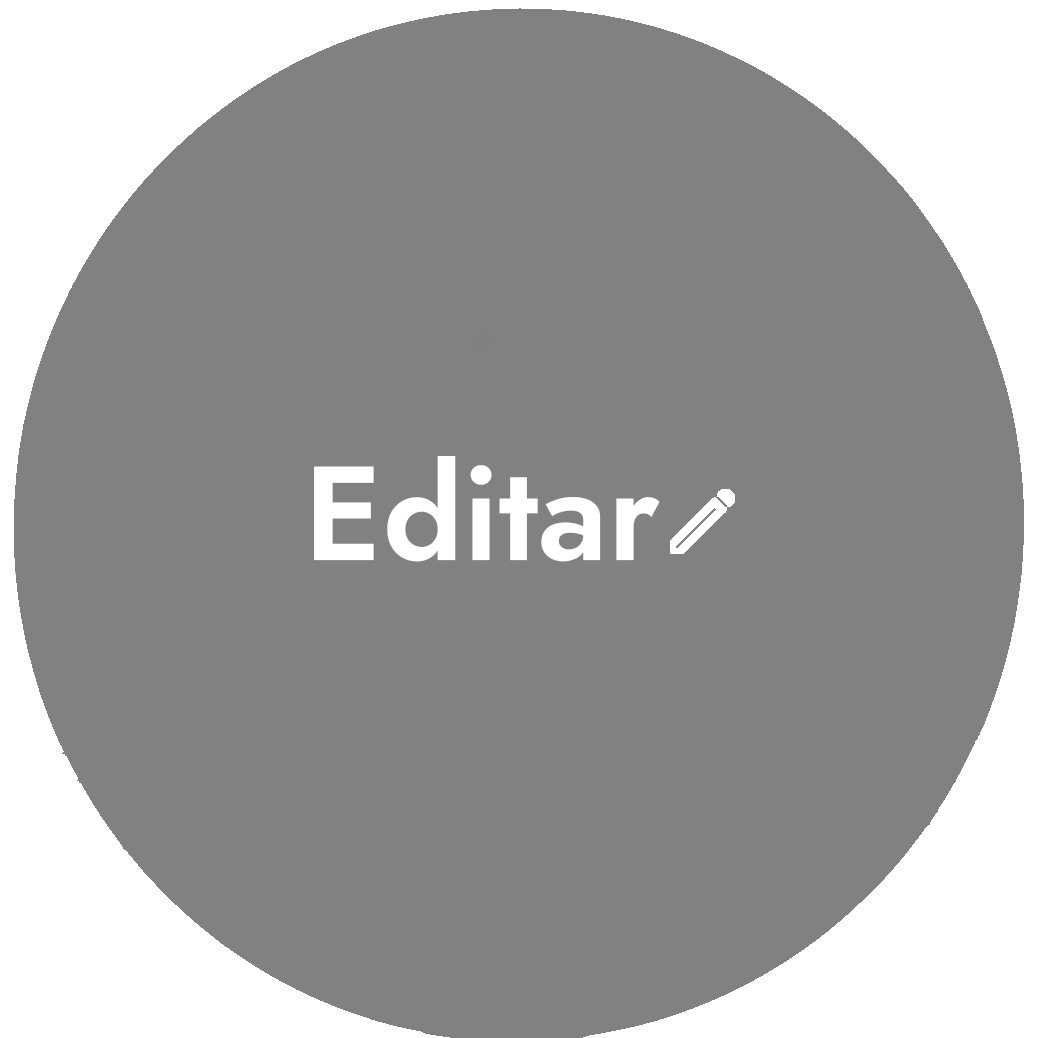
<style>
.page{position:relative;width:1038px;height:1038px;background:#818082}
.page>*{position:absolute;margin:0}
.t1{font:133.3px "Jost-SemiBold";color:#ffffff}
</style>
<div class="page">
<p class="t1" style="left:314px;top:456px;width:346px;height:106px">Editar</p>
</div>
